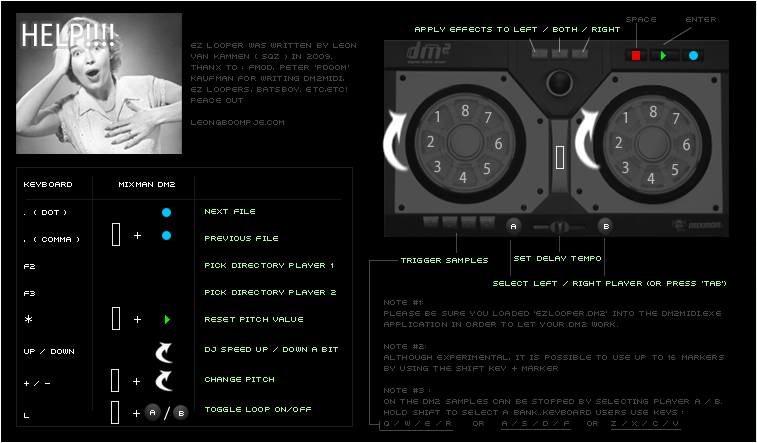
<style>
.page{position:relative;width:757px;height:443px;background:#000000}
.page>*{position:absolute;margin:0}
.t1{font:8px "04b21";letter-spacing:0.02em;color:#454545}
.t2{font:33px "Myriad-CnWeb";letter-spacing:0.02em;color:#ffffff}
.t3{font:8px "04b21";letter-spacing:0.02em;color:#adf6a6}
.t4{font:8px/11px "04b21";letter-spacing:0.02em;color:#454545}
.t5{font:8px "04b21";letter-spacing:0.02em;color:#ffffff}
.t6{font:8px/27px "04b21";letter-spacing:0.02em;color:#adf6a6}
.t7{font:8px/30px "04b21";letter-spacing:0.02em;color:#adf6a6}
.t8{font:8px/27px "04b21";letter-spacing:0.02em;color:#ffffff}
.t9{font:16px/31px "BitstreamVeraSansMono-Roman";letter-spacing:0.02em;color:#ffffff}
.t10{font:8px/32px "04b21";letter-spacing:0.02em;color:#ffffff}
.t11{font:8px/25px "04b21";letter-spacing:0.02em;color:#adf6a6}
</style>
<div class="page">
<p class="t1" style="left:626px;top:17px;width:90px;height:5px">SPACE       ENTER</p>
<p class="t2" style="left:22px;top:23px;width:92px;height:24px">HELP!!!!</p>
<p class="t3" style="left:415px;top:27px;width:205px;height:5px">APPLY EFFECTS TO LEFT / BOTH / RIGHT</p>
<p class="t4" style="left:191px;top:43px;width:165px;height:82px">EZ LOOPER WAS WRITTEN BY LEON <br>VAN KAMMEN ( SQZ ) IN 2009.<br>THANX TO : FMOD, PETER 'PDOOM' <br>KAUFMAN FOR WRITING DM2MIDI,<br>EZ LOOPERS, BATSBOY, ETC,ETC!<br>PEACE OUT<br><br>LEON@BOOMPJE.COM</p>
<p class="t5" style="left:24px;top:182px;width:151px;height:5px">KEYBOARD           MIXMAN DM2</p>
<p class="t6" style="left:205px;top:209px;width:133px;height:203px">NEXT FILE<br>PREVIOUS FILE<br>PICK DIRECTORY PLAYER 1<br>PICK DIRECTORY PLAYER 2<br>RESET PITCH VALUE<br><span class="t7">DJ SPEED UP / DOWN A BIT<br>CHANGE PITCH<br>TOGGLE LOOP ON/OFF</span></p>
<p class="t8" style="left:24px;top:210px;width:55px;height:208px">.  ( DOT )<br>,  ( COMMA )<br>F2<br>F3<br><span class="t9">*<br></span>UP / DOWN<br><span class="t10">+ / -<br>L</span></p>
<p class="t5" style="left:511px;top:224px;width:5px;height:5px">A</p>
<p class="t5" style="left:604px;top:224px;width:5px;height:5px">B</p>
<p class="t11" style="left:493px;top:256px;width:233px;height:30px;text-align:center">SET DELAY TEMPO<br>                         SELECT LEFT / RIGHT PLAYER (OR PRESS 'TAB')</p>
<p class="t3" style="left:401px;top:258px;width:87px;height:5px">TRIGGER SAMPLES</p>
<p class="t4" style="left:384px;top:300px;width:340px;height:126px">NOTE #1: <br>PLEASE BE SURE YOU LOADED 'EZLOOPER.DM2' INTO THE DM2MIDI.EXE <br>APPLICATION IN ORDER TO LET YOUR DM2 WORK.<br><br>NOTE #2: <br>ALTHOUGH EXPERIMENTAL, IT IS POSSIBLE TO USE UP TO 16 MARKERS <br>BY USING THE SHIFT KEY + MARKER<br><br>NOTE #3 :<br>ON THE DM2 SAMPLES CAN BE STOPPED BY SELECTING PLAYER A / B. <br>HOLD SHIFT TO SELECT A BANK..KEYBOARD USERS USE KEYS :<br>Q / W / E / R     OR    A / S / D / F    OR   Z / X / C / V</p>
</div>
